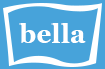
<style>
.page{position:relative;width:105px;height:69px;background:#47a3da}
.page>*{position:absolute;margin:0}
.t1{font:26.4px "Vani-Bold";color:#ffffff}
</style>
<div class="page">
<p class="t1" style="left:19px;top:23px;width:67px;height:20px">bella</p>
</div>
